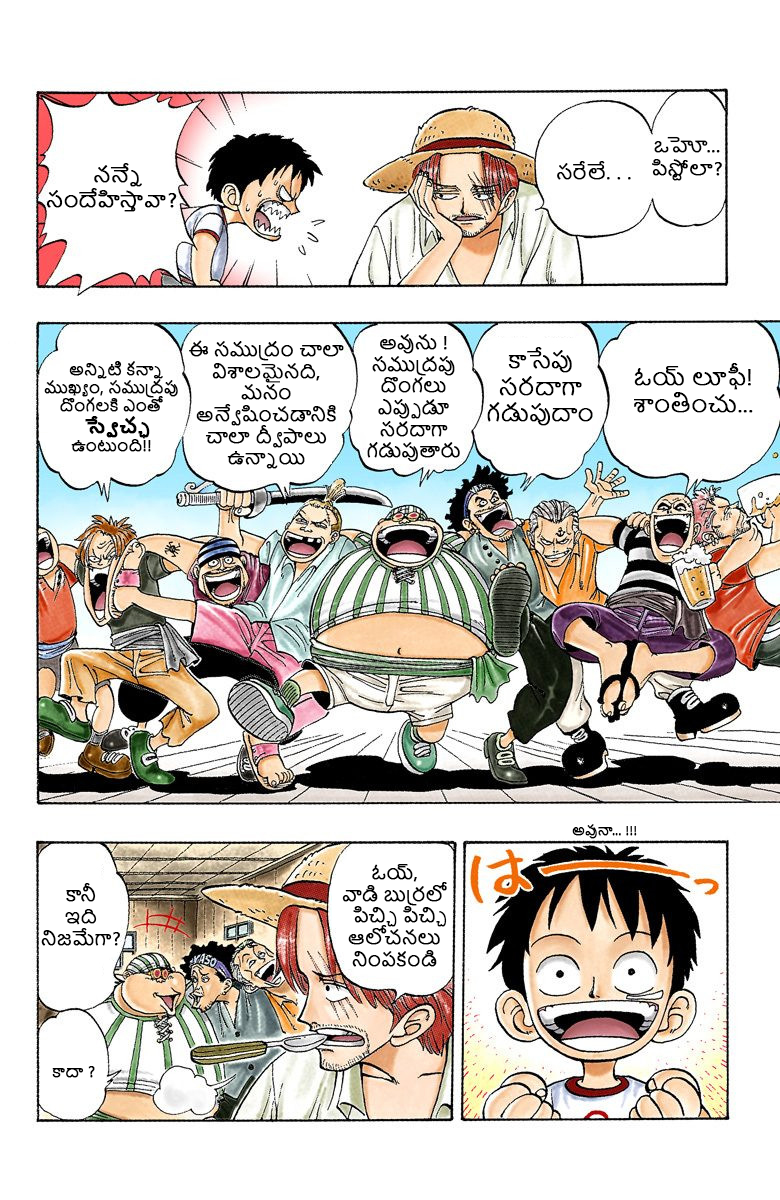
<style>
.page{position:relative;width:780px;height:1200px;background:#ffffff}
.page>*{position:absolute;margin:0}
.t1{font:19.3px "NirmalaUI";color:#000000;font-weight:bold}
.t2{font:19.2px "NirmalaUI";color:#000000;font-weight:bold}
.t3{font:20.2px "NirmalaUI";color:#000000;font-weight:bold}
.t4{font:18px "NirmalaUI";color:#000000;font-weight:bold}
.t5{font:22px "NirmalaUI";color:#000000;font-weight:bold}
.t6{font:15px "NirmalaUI";color:#000000;font-weight:bold}
.t7{font:18px "NirmalaUI-Bold";color:#000000;font-weight:bold}
.t8{font:12.9px "NirmalaUI";color:#000000;font-weight:bold}
.t9{font:15.1px "NirmalaUI";color:#000000;font-weight:bold}
</style>
<div class="page">
<p class="t1" style="left:652px;top:136px;width:70px;height:45px;text-align:center">ఒహో...  పిస్టోలా?</p>
<p class="t2" style="left:557px;top:161px;width:74px;height:19px">సరేలే. . .</p>
<p class="t3" style="left:46px;top:163px;width:131px;height:49px;text-align:center">నన్నే<br>సందేహిస్తావా?</p>
<p class="t4" style="left:189px;top:340px;width:155px;height:129px;text-align:center">ఈ సముద్రం చాలా విశాలమైనది, <br>మనం అన్వేషించడానికి చాలా ద్వీపాలు ఉన్నాయి</p>
<p class="t4" style="left:367px;top:334px;width:93px;height:128px;text-align:center">అవును ! సముద్రపు దొంగలు ఎప్పుడూ సరదాగా గడుపుతారు</p>
<p class="t5" style="left:487px;top:347px;width:106px;height:79px;text-align:center">కాసేపు సరదాగా గడుపుదాం</p>
<p class="t6" style="left:44px;top:361px;width:134px;height:91px;text-align:center">అన్నిటి కన్నా ముఖ్యం, సముద్రపు దొంగలకి ఎంతో  <span class="t7">స్వేచ్ఛ </span>ఉంటుంది!!</p>
<p class="t5" style="left:634px;top:363px;width:119px;height:50px;text-align:center">ఓయ్ లూఫీ! శాంతించు...</p>
<p class="t8" style="left:572px;top:824px;width:65px;height:15px">అవునా... !!!</p>
<p class="t4" style="left:342px;top:864px;width:105px;height:103px;text-align:center">ఓయ్, <br>వాడి బుర్రలో పిచ్చి పిచ్చి ఆలోచనలు నింపకండి</p>
<p class="t4" style="left:41px;top:883px;width:79px;height:63px;text-align:center">కానీ<br>ఇది నిజమేగా?</p>
<p class="t9" style="left:52px;top:1066px;width:43px;height:12px">కాదా ?</p>
</div>
